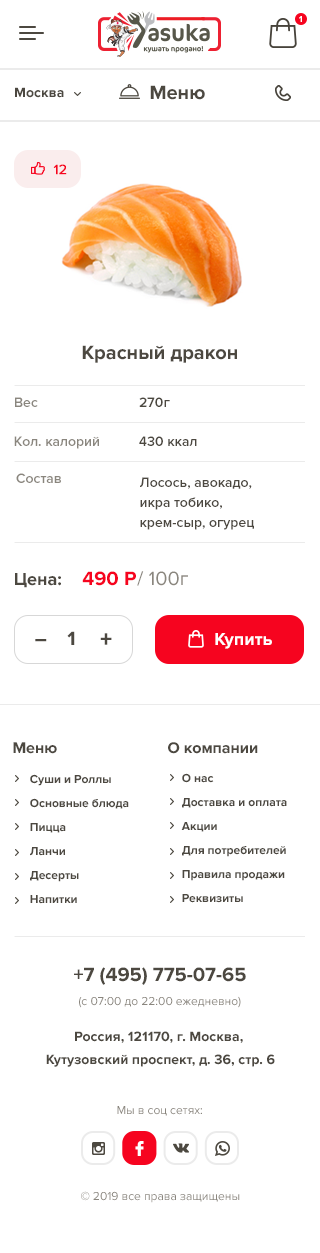
<style>
.page{position:relative;width:320px;height:1253px;background:#ffffff}
.page>*{position:absolute;margin:0}
.t1{font:9px "ProximaNova-Bold";color:#ffffff}
.t2{font:14px "ProximaNova-Bold";color:#4c4840}
.t3{font:20px "ProximaNova-Bold";color:#4c4840}
.t4{font:14px "ProximaNova-Regular";color:#f6041f;font-weight:bold}
.t5{font:14px "ProximaNova-Semibold";color:#8a867e}
.t6{font:14px "ProximaNova-Semibold";color:#4c4840}
.t7{font:14px/20px "ProximaNova-Semibold";color:#4c4840}
.t8{font:18px "ProximaNova-Bold";color:#4c4840}
.t9{font:20px "ProximaNova-Bold";color:#f6041f}
.t10{font:20px "ProximaNova-Regular";color:#8a867e}
.t11{font:24px "ProximaNova-Extrabld";color:#4c4840;scale:0.8 1}
.t12{font:24px "ProximaNova-Extrabld";color:#4c4840}
.t13{font:18px "ProximaNova-Bold";color:#ffffff}
.t14{font:16px "ProximaNova-Bold";color:#4c4840}
.t15{font:12px/24px "ProximaNova-Bold";color:#4c4840}
.t16{font:12px "ProximaNova-Regular";color:#8a867e}
.t17{font:14px/23px "ProximaNova-Bold";color:#4c4840}
</style>
<div class="page">
<p class="t1" style="left:299px;top:16px;width:3px;height:6px">1</p>
<p class="t2" style="left:15px;top:87px;width:49px;height:11px">Москва</p>
<p class="t3" style="left:150px;top:85px;width:55px;height:15px">Меню</p>
<p class="t4" style="left:53px;top:164px;width:14px;height:11px">12</p>
<p class="t3" style="left:82px;top:345px;width:155px;height:18px">Красный дракон</p>
<p class="t5" style="left:15px;top:397px;width:23px;height:10px">Вес</p>
<p class="t6" style="left:139px;top:397px;width:31px;height:10px">270г</p>
<p class="t5" style="left:14px;top:436px;width:85px;height:13px">Кол. калорий</p>
<p class="t6" style="left:139px;top:436px;width:58px;height:10px">430 ккал</p>
<p class="t5" style="left:16px;top:473px;width:45px;height:10px">Состав</p>
<p class="t7" style="left:140px;top:477px;width:114px;height:53px">Лосось, авокадо, икра тобико, крем-сыр, огурец</p>
<p class="t8" style="left:15px;top:573px;width:46px;height:15px">Цена:</p>
<p class="t9" style="left:82px;top:571px;width:54px;height:15px">490 P</p>
<p class="t10" style="left:137px;top:571px;width:51px;height:15px"><span class="t3"> </span>/ 100г</p>
<p class="t11" style="left:35px;top:639px;width:12px;height:3px">_</p>
<p class="t3" style="left:67px;top:631px;width:8px;height:14px">1</p>
<p class="t12" style="left:100px;top:633px;width:12px;height:12px">+</p>
<p class="t13" style="left:215px;top:633px;width:57px;height:16px">Купить</p>
<p class="t14" style="left:13px;top:742px;width:44px;height:12px">Меню</p>
<p class="t14" style="left:168px;top:742px;width:90px;height:12px">О компании</p>
<p class="t15" style="left:30px;top:774px;width:99px;height:130px">Суши и Роллы<br>Основные блюда<br>Пицца<br>Ланчи<br>Десерты<br>Напитки</p>
<p class="t15" style="left:181px;top:773px;width:106px;height:130px">О нас<br>Доставка и оплата <br>Акции<br>Для потребителей<br>Правила продажи<br>Реквизиты</p>
<p class="t3" style="left:74px;top:967px;width:172px;height:18px">+7 (495) 775-07-65</p>
<p class="t16" style="left:79px;top:996px;width:162px;height:12px">(с 07:00 до 22:00 ежедневно)</p>
<p class="t17" style="left:46px;top:1031px;width:229px;height:36px;text-align:center">Россия, 121170, г. Москва, <br>Кутузовский проспект, д. 36, стр. 6</p>
<p class="t16" style="left:117px;top:1106px;width:85px;height:10px">Мы в соц сетях:</p>
<p class="t16" style="left:81px;top:1191px;width:159px;height:12px">© 2019 все права защищены</p>
</div>
